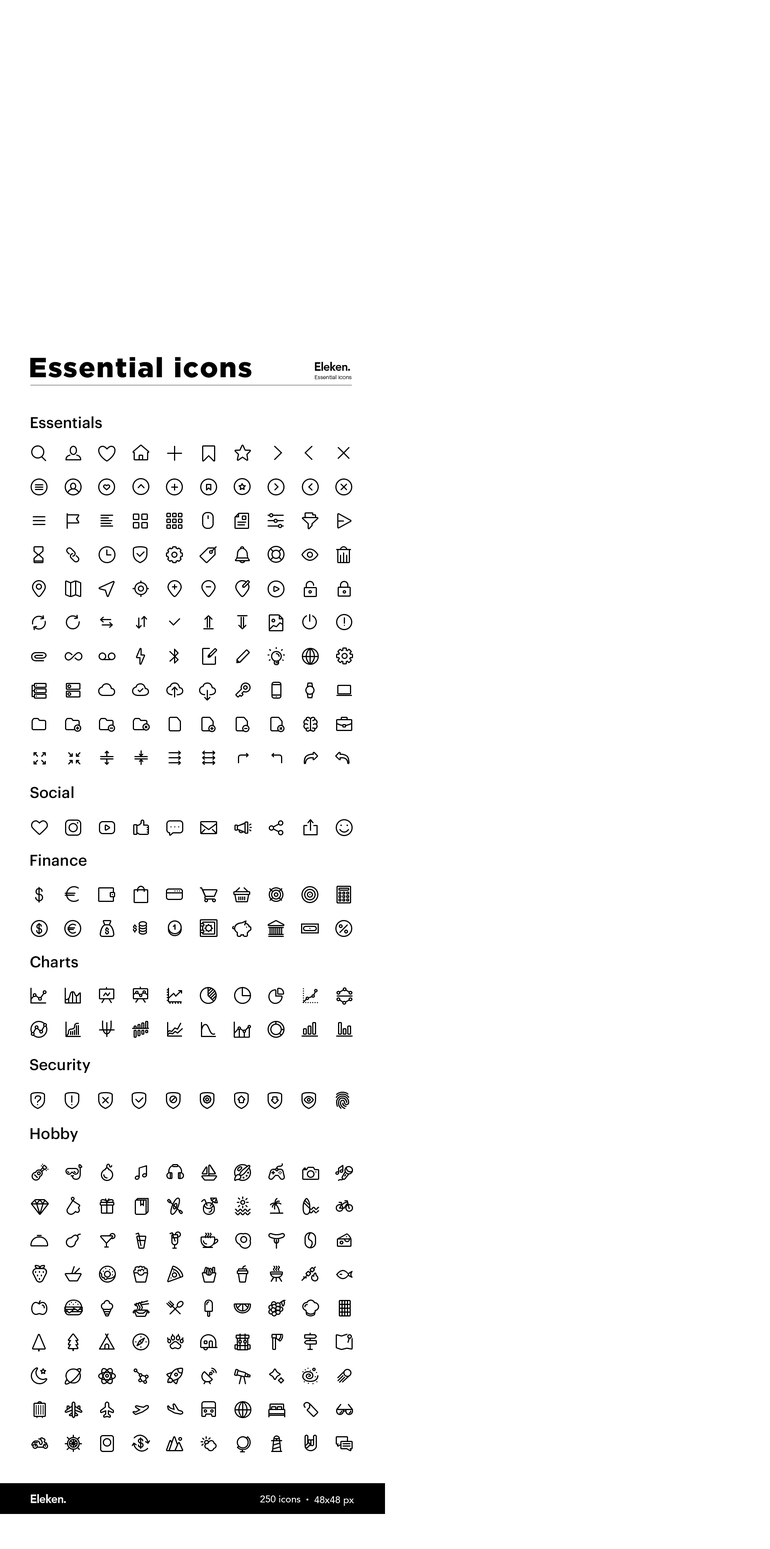
<style>
.page{position:relative;width:770px;height:1549px;background:#ffffff}
.page>*{position:absolute;margin:0}
.t1{font:27.7px "Gotham-Black";letter-spacing:0.04em;color:#000000}
.t2{font:15.4px "Graphik-Medium";color:#000000}
</style>
<div class="page">
<p class="t1" style="left:30px;top:357px;width:221px;height:21px">Essential icons</p>
<p class="t2" style="left:31px;top:416px;width:71px;height:12px">Essentials</p>
<p class="t2" style="left:30px;top:786px;width:44px;height:12px">Social</p>
<p class="t2" style="left:30px;top:854px;width:57px;height:12px">Finance</p>
<p class="t2" style="left:30px;top:955px;width:48px;height:13px">Charts</p>
<p class="t2" style="left:30px;top:1059px;width:60px;height:14px">Security</p>
<p class="t2" style="left:30px;top:1127px;width:48px;height:15px">Hobby</p>
</div>
